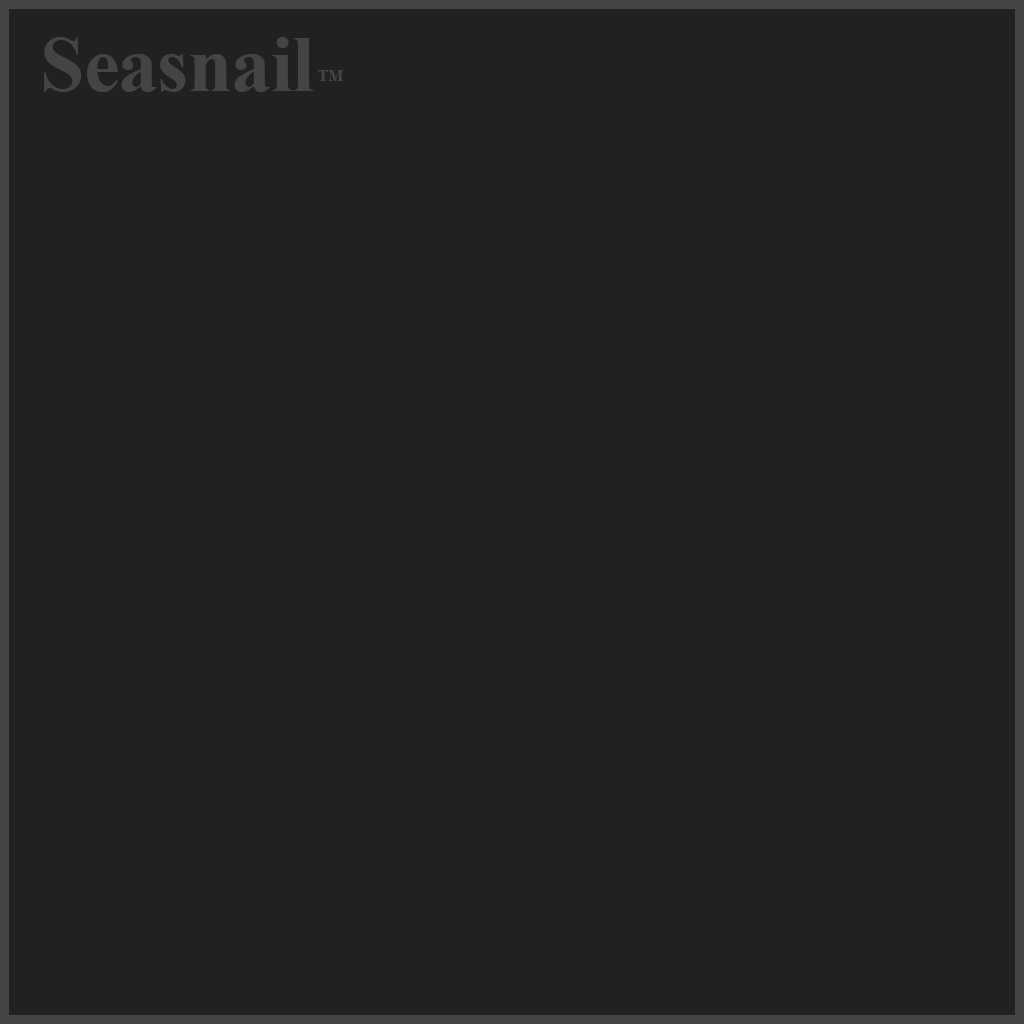
<style>
.page{position:relative;width:1024px;height:1024px;background:#212121}
.page>*{position:absolute;margin:0}
.t1{font:80px "TimesNewRomanPS-BoldMT";letter-spacing:-0.01em;color:#434445}
.t2{font:16px "TimesNewRomanPS-BoldMT";letter-spacing:-0.01em;color:#434445}
</style>
<div class="page">
<p class="t1" style="left:44px;top:37px;width:270px;height:55px">Seasnail</p>
<p class="t2" style="left:318px;top:70px;width:26px;height:11px">TM</p>
</div>
